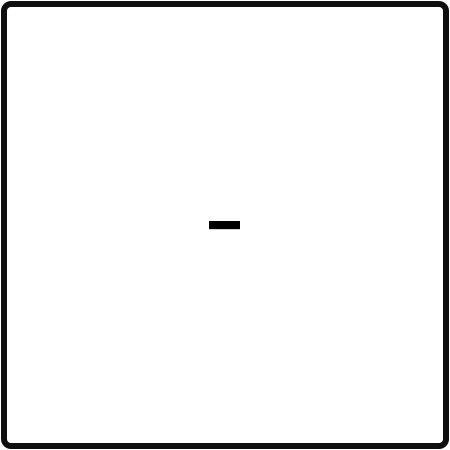
<style>
.page{position:relative;width:450px;height:450px;background:#ffffff}
.page>*{position:absolute;margin:0}
.t1{font:125px "MyriadPro-Regular";color:#000000}
</style>
<div class="page">
<p class="t1" style="left:209px;top:221px;width:31px;height:9px">-</p>
</div>
